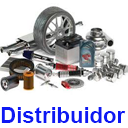
<style>
.page{position:relative;width:128px;height:128px;background:#ffffff}
.page>*{position:absolute;margin:0}
.t1{font:22px "Arial-BoldMT";color:#0d18f3}
</style>
<div class="page">
<p class="t1" style="left:1px;top:107px;width:125px;height:16px">Distribuidor</p>
</div>
